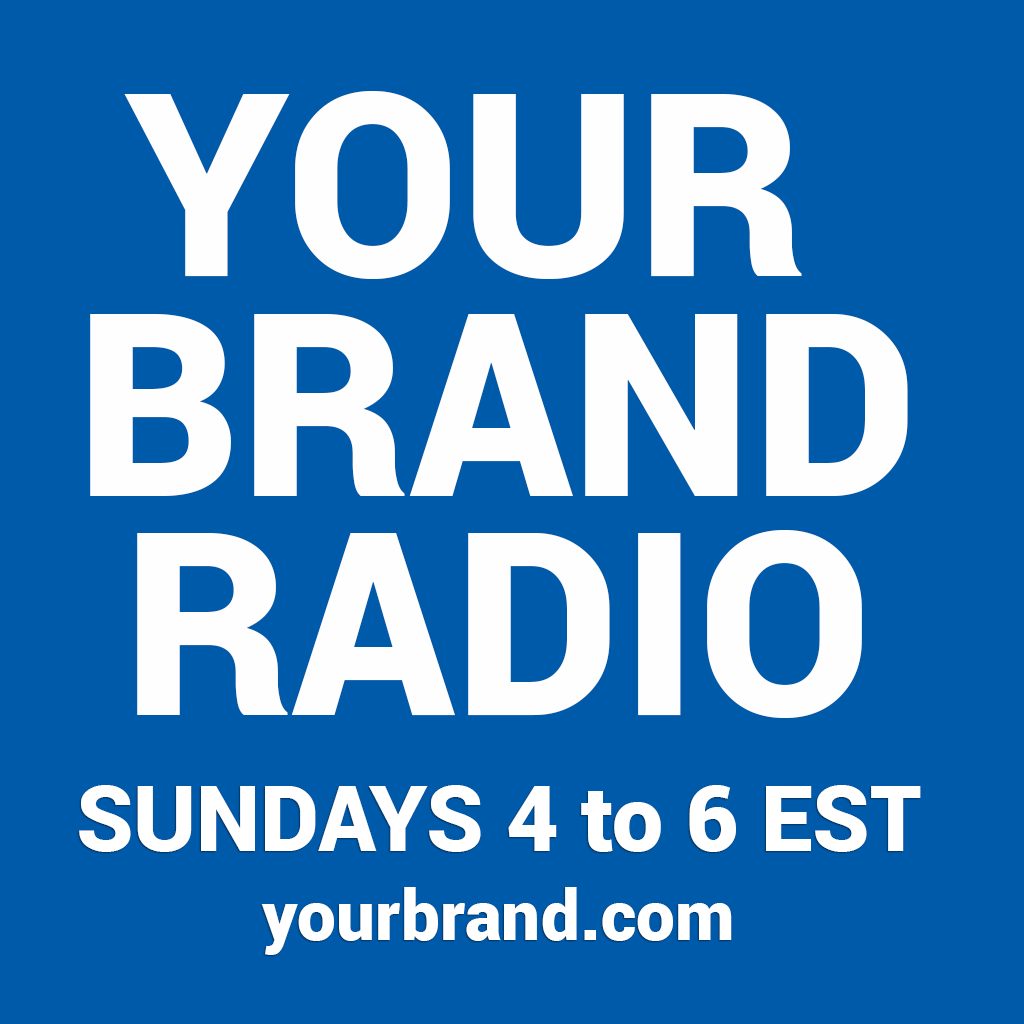
<style>
.page{position:relative;width:1024px;height:1024px;background:#005aaa}
.page>*{position:absolute;margin:0}
.t1{font:255.8px/219.4px "Roboto-Black";color:#fefefe}
.t2{font:90.6px "Roboto-Black";color:#ffffff}
.t3{font:69.5px "Roboto-Black";color:#ffffff}
</style>
<div class="page">
<p class="t1" style="left:90px;top:91px;width:818px;height:627px;text-align:center">YOUR <br>BRAND<br>RADIO</p>
<p class="t2" style="left:79px;top:785px;width:842px;height:67px">SUNDAYS 4 to 6 EST</p>
<p class="t3" style="left:261px;top:887px;width:471px;height:68px">yourbrand.com</p>
</div>
